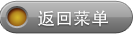
<style>
.page{position:relative;width:133px;height:34px}
.page>*{position:absolute;margin:0}
.t1{font:17.2px "AdobeHeitiStd-Regular";color:#ffffff;scale:1.05 1}
</style>
<div class="page">
<p class="t1" style="left:38px;top:10px;width:70px;height:17px">返回菜单</p>
</div>
